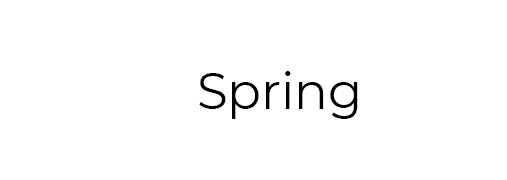
<style>
.page{position:relative;width:507px;height:180px;background:#ffffff}
.page>*{position:absolute;margin:0}
.t1{font:50px "Montserrat-Regular";color:#000000}
</style>
<div class="page">
<p class="t1" style="left:199px;top:71px;width:159px;height:48px">Spring</p>
</div>
